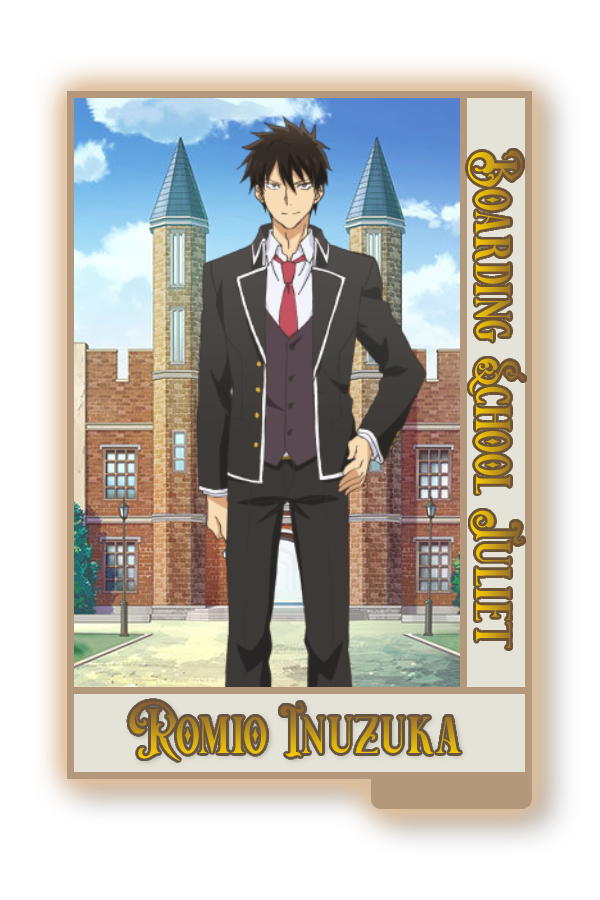
<style>
.page{position:relative;width:600px;height:900px;background:#ffffff}
.page>*{position:absolute;margin:0}
.t1{font:58.9px "VictorianDecadeDemoVersion"}
.t2{font:62.3px "VictorianDecadeDemoVersion"}
</style>
<div class="page">
<p class="t1" style="left:468px;top:150px;width:57px;height:498px;rotate:90deg">Boarding School Juliet</p>
<p class="t2" style="left:127px;top:701px;width:334px;height:61px">Romio Inuzuka</p>
</div>
